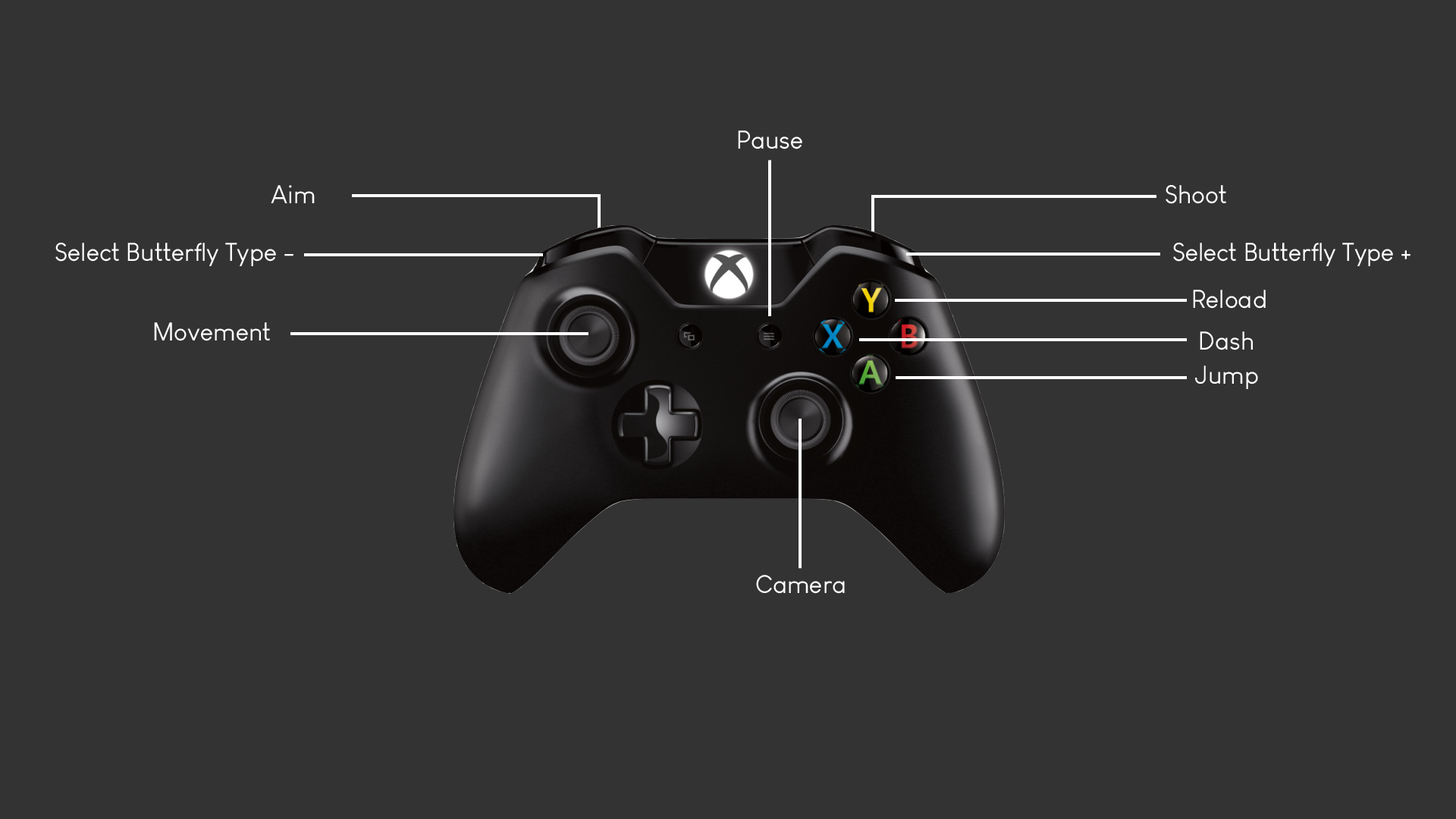
<style>
.page{position:relative;width:1456px;height:819px;background:#333333}
.page>*{position:absolute;margin:0}
.t1{font:25.3px "LouisGeorgeCafe";color:#ffffff}
</style>
<div class="page">
<p class="t1" style="left:738px;top:130px;width:64px;height:19px">Pause</p>
<p class="t1" style="left:271px;top:185px;width:44px;height:18px">Aim</p>
<p class="t1" style="left:1166px;top:185px;width:60px;height:19px">Shoot</p>
<p class="t1" style="left:55px;top:243px;width:238px;height:23px">Select Butterfly Type -</p>
<p class="t1" style="left:1173px;top:243px;width:237px;height:23px">Select Butterfly Type +</p>
<p class="t1" style="left:1193px;top:290px;width:73px;height:19px">Reload</p>
<p class="t1" style="left:154px;top:322px;width:116px;height:19px">Movement</p>
<p class="t1" style="left:1200px;top:331px;width:53px;height:19px">Dash</p>
<p class="t1" style="left:1195px;top:366px;width:63px;height:23px">Jump</p>
<p class="t1" style="left:756px;top:575px;width:89px;height:19px">Camera</p>
</div>
